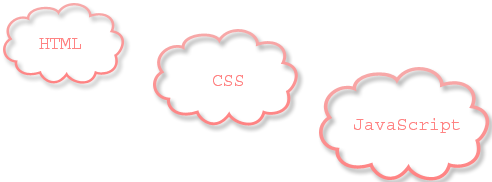
<style>
.page{position:relative;width:492px;height:182px;background:#ffffff}
.page>*{position:absolute;margin:0}
.t1{font:18px "Courier";color:#ff8383}
</style>
<div class="page">
<p class="t1" style="left:39px;top:38px;width:42px;height:11px">HTML</p>
<p class="t1" style="left:213px;top:75px;width:30px;height:11px">CSS</p>
<p class="t1" style="left:354px;top:118px;width:106px;height:15px">JavaScript</p>
</div>
